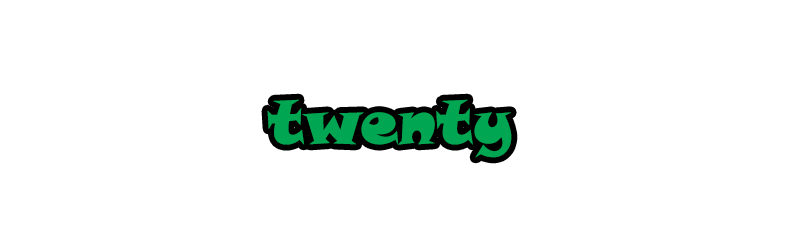
<style>
.page{position:relative;width:812px;height:249px;background:#ffffff}
.page>*{position:absolute;margin:0}
.t1{font:60px "SnapITC-Regular";color:#00a651}
</style>
<div class="page">
<p class="t1" style="left:267px;top:99px;width:245px;height:59px">twenty</p>
</div>
